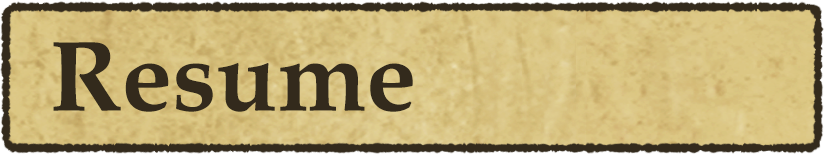
<style>
.page{position:relative;width:824px;height:155px}
.page>*{position:absolute;margin:0}
.t1{font:100px "BookAntiqua-Bold";color:#332a1c}
</style>
<div class="page">
<p class="t1" style="left:53px;top:42px;width:360px;height:70px">Resume</p>
</div>
